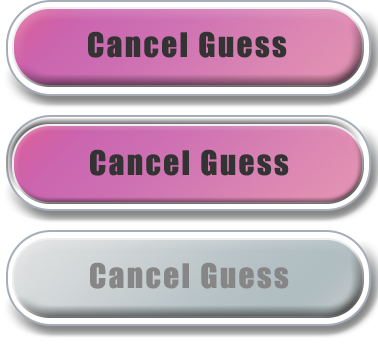
<style>
.page{position:relative;width:378px;height:344px}
.page>*{position:absolute;margin:0}
.t1{font:31.2px "Impact";letter-spacing:0.075em;color:#333333}
.t2{font:31.2px "Impact";letter-spacing:0.075em;color:#878686}
</style>
<div class="page">
<p class="t1" style="left:88px;top:31px;width:199px;height:27px">Cancel Guess</p>
<p class="t1" style="left:90px;top:149px;width:199px;height:27px">Cancel Guess</p>
<p class="t2" style="left:90px;top:262px;width:199px;height:27px">Cancel Guess</p>
</div>
